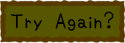
<style>
.page{position:relative;width:125px;height:43px;background:#575600}
.page>*{position:absolute;margin:0}
.t1{font:22.4px "KAWAIITEGAKIMOJI";color:#000000}
</style>
<div class="page">
<p class="t1" style="left:11px;top:11px;width:103px;height:20px">Try Again?</p>
</div>
